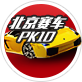
<style>
.page{position:relative;width:82px;height:82px;background:#ffffff}
.page>*{position:absolute;margin:0}
.t1{font:14.6px "MFLiHei_Noncommercial-Regular";letter-spacing:0.06em;color:#ffffff;scale:0.88 1}
.t2{font:12px "MFLiHei_Noncommercial-Regular";letter-spacing:0.06em;color:#ffffff;scale:0.88 1}
</style>
<div class="page">
<p class="t1" style="left:9px;top:16px;width:58px;height:13px">北京赛车</p>
<p class="t2" style="left:17px;top:31px;width:39px;height:11px">PK10</p>
</div>
